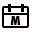
<style>
.page{position:relative;width:32px;height:32px;background:#fffbfb}
.page>*{position:absolute;margin:0}
.t1{font:12px "Futura-CondensedExtraBold";letter-spacing:0.01em;color:#000000}
</style>
<div class="page">
<p class="t1" style="left:10px;top:16px;width:11px;height:9px">M</p>
</div>
